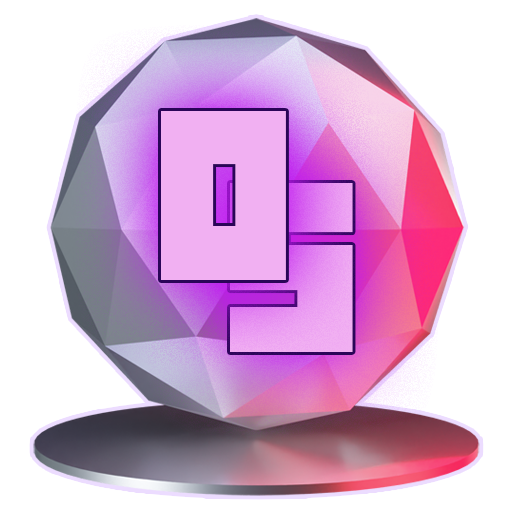
<style>
.page{position:relative;width:512px;height:512px;background:#ffffff}
.page>*{position:absolute;margin:0}
.t1{font:240.8px "Ifinkufreeky";color:#f1b0f2}
</style>
<div class="page">
<p class="t1" style="left:161px;top:111px;width:125px;height:169px">o</p>
<p class="t1" style="left:230px;top:183px;width:123px;height:169px">S</p>
</div>
